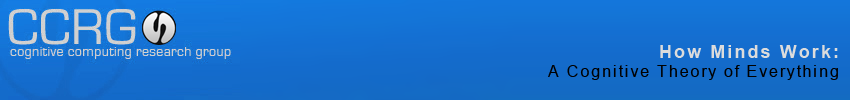
<style>
.page{position:relative;width:850px;height:100px}
.page>*{position:absolute;margin:0}
.t1{font:16px "ArialMT";letter-spacing:0.115em;color:#000000}
.t2{font:18px "Arial-BoldMT";letter-spacing:0.115em;color:#dcdcdc}
</style>
<div class="page">
<p class="t1" style="left:548px;top:45px;width:290px;height:35px;text-align:right"><span class="t2">How Minds Work:<br></span>A Cognitive Theory of Everything</p>
</div>
